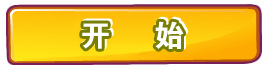
<style>
.page{position:relative;width:270px;height:70px;background:#ffffff}
.page>*{position:absolute;margin:0}
.t1{font:30px "Jdahei";letter-spacing:0.3em;color:#ffffff}
.t2{font:30px "Jdahei";letter-spacing:0.3em}
</style>
<div class="page">
<p class="t1" style="left:82px;top:21px;width:102px;height:28px">开  始</p>
<p class="t2" style="left:84px;top:19px;width:102px;height:28px">开  始</p>
</div>
